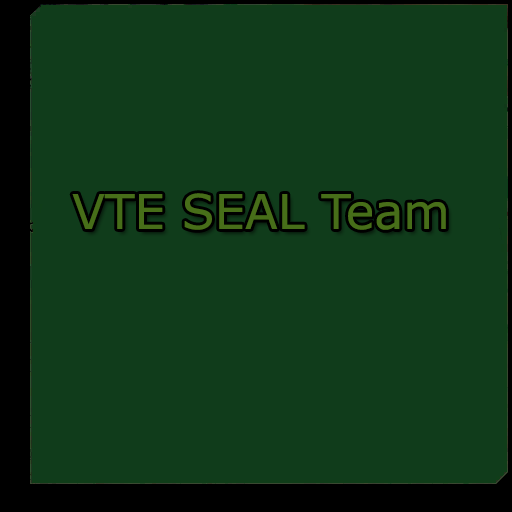
<style>
.page{position:relative;width:512px;height:512px;background:#103c1b}
.page>*{position:absolute;margin:0}
.t1{font:48px "Verdana";color:#476e19}
</style>
<div class="page">
<p class="t1" style="left:72px;top:193px;width:374px;height:37px">VTE SEAL Team</p>
</div>
